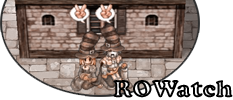
<style>
.page{position:relative;width:233px;height:100px;background:#ffffff}
.page>*{position:absolute;margin:0}
.t1{font:24px "CooperBlackStd"}
</style>
<div class="page">
<p class="t1" style="left:113px;top:80px;width:120px;height:18px">ROWatch</p>
</div>
